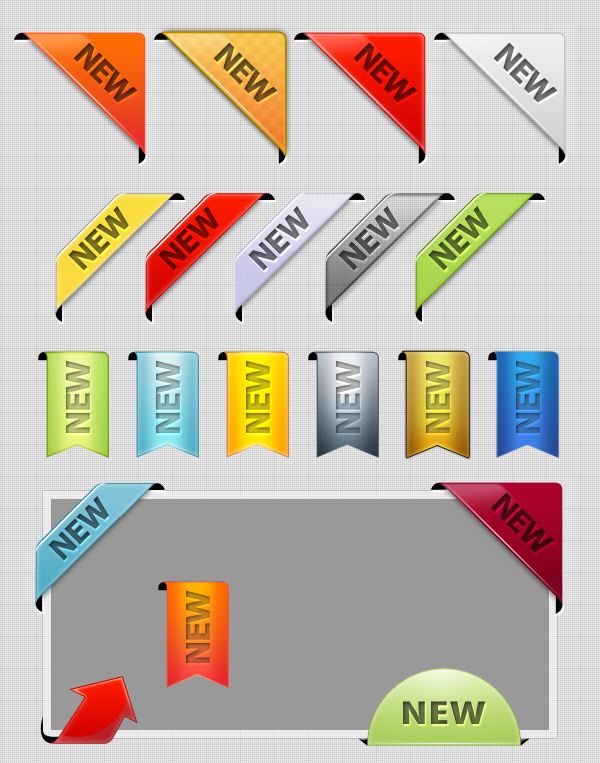
<style>
.page{position:relative;width:600px;height:763px;background:#e4e4e4}
.page>*{position:absolute;margin:0}
.t1{font:30px "Tahoma-Bold";letter-spacing:-0.01em;color:#74661e;text-transform:uppercase}
.t2{font:30px "Tahoma-Bold";letter-spacing:-0.01em;color:#6e0700;text-transform:uppercase}
.t3{font:30px "Tahoma-Bold";letter-spacing:-0.01em;color:#65636e;text-transform:uppercase}
.t4{font:30px "Tahoma-Bold";letter-spacing:-0.01em;color:#4c4c4c;text-transform:uppercase}
.t5{font:30px "Tahoma-Bold";letter-spacing:-0.01em;color:#536628;text-transform:uppercase}
.t6{font:32.5px "Tahoma-Bold";letter-spacing:-0.05em;text-transform:uppercase}
.t7{font:30px "Tahoma-Bold";letter-spacing:-0.01em;color:#325761;text-transform:uppercase}
.t8{font:33.5px "MyriadPro-BoldCond";color:#5a6739;scale:1.61 1}
</style>
<div class="page">
<p class="t1" style="left:68px;top:206px;width:61px;height:65px;rotate:-45deg">NEW</p>
<p class="t2" style="left:158px;top:206px;width:61px;height:65px;rotate:-45deg">NEW</p>
<p class="t3" style="left:248px;top:206px;width:61px;height:65px;rotate:-45deg">NEW</p>
<p class="t4" style="left:338px;top:206px;width:61px;height:65px;rotate:-45deg">NEW</p>
<p class="t5" style="left:428px;top:206px;width:61px;height:65px;rotate:-45deg">NEW</p>
<p class="t6" style="left:66px;top:360px;width:24px;height:73px;rotate:-90deg">NEW</p>
<p class="t6" style="left:156px;top:360px;width:24px;height:73px;rotate:-90deg">NEW</p>
<p class="t6" style="left:246px;top:360px;width:24px;height:73px;rotate:-90deg">NEW</p>
<p class="t6" style="left:336px;top:360px;width:24px;height:73px;rotate:-90deg">NEW</p>
<p class="t6" style="left:426px;top:360px;width:24px;height:73px;rotate:-90deg">NEW</p>
<p class="t6" style="left:516px;top:360px;width:24px;height:73px;rotate:-90deg">NEW</p>
<p class="t7" style="left:48px;top:496px;width:61px;height:65px;rotate:-45deg">NEW</p>
<p class="t6" style="left:186px;top:590px;width:24px;height:73px;rotate:-90deg">NEW</p>
<p class="t8" style="left:403px;top:701px;width:83px;height:23px">NEW</p>
</div>
